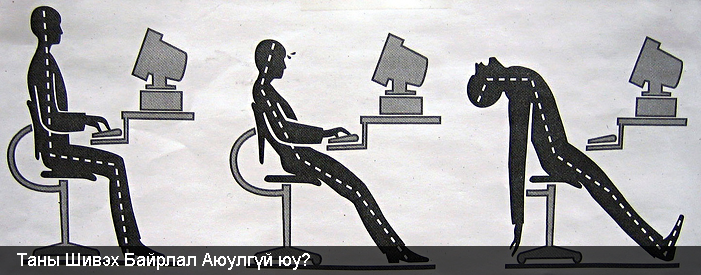
<style>
.page{position:relative;width:701px;height:275px}
.page>*{position:absolute;margin:0}
.t1{font:18px "ArialMT";color:#ffffff}
</style>
<div class="page">
<p class="t1" style="left:17px;top:253px;width:293px;height:17px">Таны Шивэх Байрлал Аюулгүй юу?</p>
</div>
